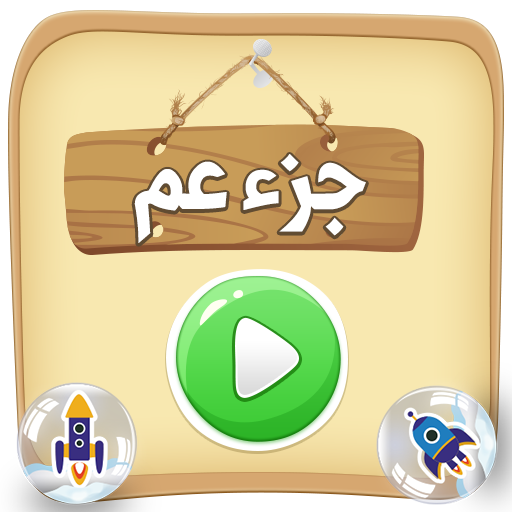
<style>
.page{position:relative;width:512px;height:512px}
.page>*{position:absolute;margin:0}
.t1{font:120px "Shorooq_N1";color:#ffffff}
</style>
<div class="page">
<p class="t1" style="left:134px;top:154px;width:232px;height:89px">جزء عم</p>
</div>
